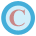
<style>
.page{position:relative;width:36px;height:36px;background:#ffffff}
.page>*{position:absolute;margin:0}
.t1{font:24.3px "TimesNewRomanPS-BoldMT";color:#c98787}
</style>
<div class="page">
<p class="t1" style="left:9px;top:9px;width:16px;height:18px">C</p>
</div>
